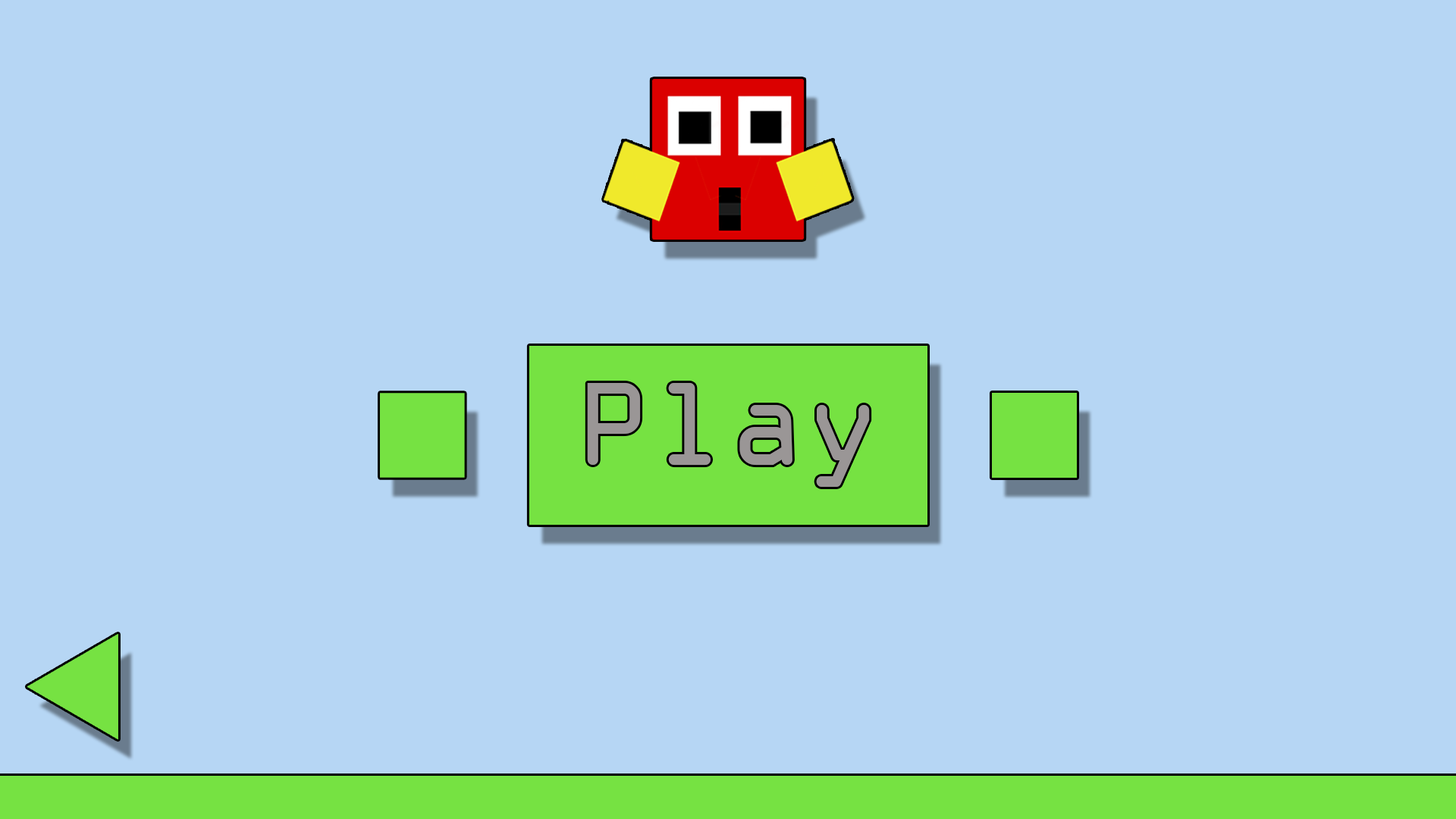
<style>
.page{position:relative;width:1456px;height:819px;background:#b6d6f4}
.page>*{position:absolute;margin:0}
.t1{font:126.4px "OCRAExtended";color:#9a9696}
</style>
<div class="page">
<p class="t1" style="left:587px;top:383px;width:283px;height:104px">Play</p>
</div>
